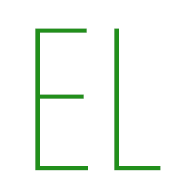
<style>
.page{position:relative;width:196px;height:196px;background:#ffffff}
.page>*{position:absolute;margin:0}
.t1{font:200px "AvenirNextCondensed-UltraLight";color:#218f1b}
</style>
<div class="page">
<p class="t1" style="left:35px;top:28px;width:126px;height:143px">EL</p>
</div>
